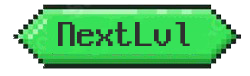
<style>
.page{position:relative;width:250px;height:76px;background:#ffffff}
.page>*{position:absolute;margin:0}
.t1{font:38.2px "NeoDunggeunmo-Regular";color:#2f2f2f}
</style>
<div class="page">
<p class="t1" style="left:58px;top:22px;width:132px;height:24px">NextLvl</p>
</div>
